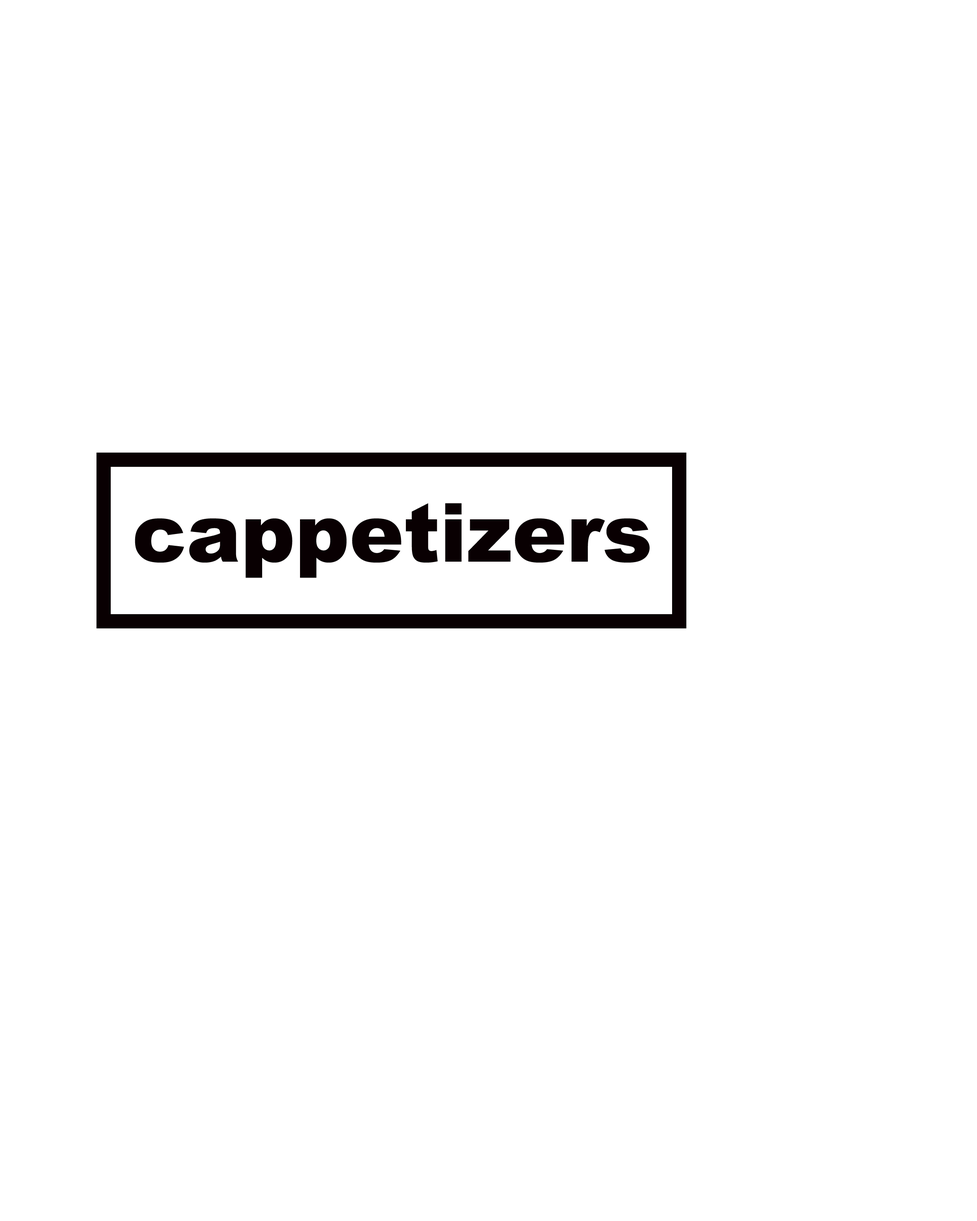
<style>
.page{position:relative;width:977px;height:1221px;background:#ffffff}
.page>*{position:absolute;margin:0}
.t1{font:81.4px "Arial-Black";color:#090002}
</style>
<div class="page">
<p class="t1" style="left:135px;top:503px;width:515px;height:75px">cappetizers</p>
</div>
